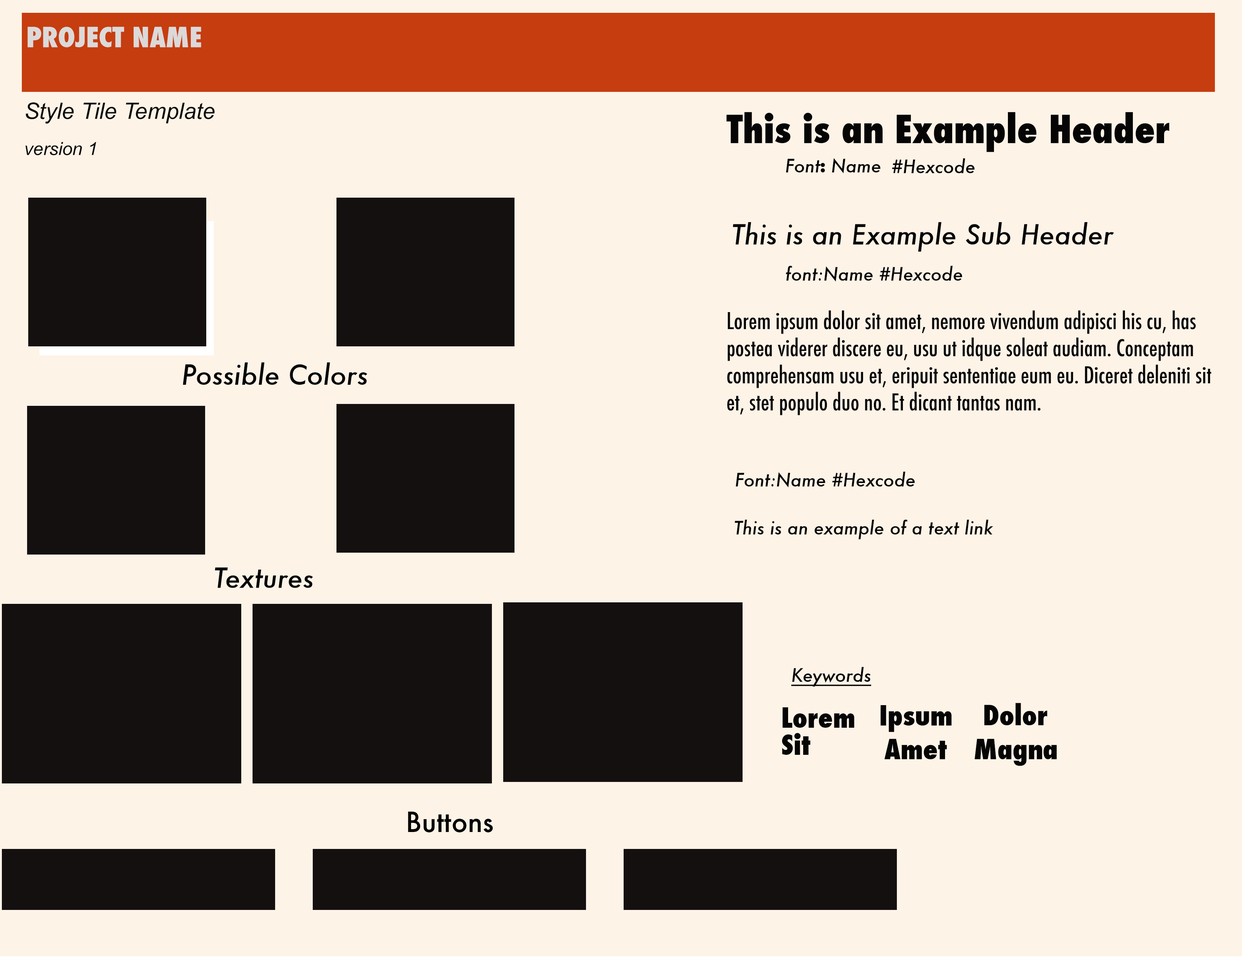
<style>
.page{position:relative;width:1242px;height:960px;background:#fdf3e7}
.page>*{position:absolute;margin:0}
.t1{font:27.1px "Futura-CondensedExtraBold";color:#dcd9d9}
.t2{font:22.6px/9px "Arial-ItalicMT";color:#090909}
.t3{font:18.1px/9px "Arial-ItalicMT";color:#090909}
.t4{font:37.6px "Futura-CondensedExtraBold";color:#050505}
.t5{font:18.1px "Futura-MediumItalic";color:#050505}
.t6{font:18.1px "Futura-CondensedExtraBold";color:#050505}
.t7{font:27.1px/9px "Futura-MediumItalic";color:#050505}
.t8{font:18.1px/9px "Futura-MediumItalic";color:#050505}
.t9{font:22.6px/27.1px "Futura-CondensedMedium";color:#050505}
.t10{font:27.1px "Futura-MediumItalic";color:#050505}
.t11{font:27.1px "Futura-CondensedExtraBold";color:#050505}
.t12{font:18.1px "Futura-MediumItalic";color:#050505;text-decoration:underline}
.t13{font:27.1px/9px "Futura-CondensedExtraBold";color:#050505}
.t14{font:27.1px/9px "Futura-CondensedExtraBold";color:#050505;text-decoration:underline}
.t15{font:27.1px "Futura-Medium";color:#000000}
</style>
<div class="page">
<p class="t1" style="left:27px;top:27px;width:174px;height:20px">PROJECT NAME</p>
<p class="t2" style="left:25px;top:102px;width:190px;height:53px">Style Tile Template <br><br><br><br><span class="t3">version 1</span></p>
<p class="t4" style="left:727px;top:112px;width:443px;height:40px">This is an Example Header</p>
<p class="t5" style="left:786px;top:158px;width:94px;height:16px">Font<span class="t6">: </span>Name</p>
<p class="t5" style="left:892px;top:158px;width:83px;height:15px">#Hexcode</p>
<p class="t7" style="left:733px;top:222px;width:381px;height:60px">This is an Example Sub Header <br><br><br><br>   <span class="t8"> font:Name #Hexcode</span></p>
<p class="t9" style="left:727px;top:310px;width:485px;height:105px">Lorem ipsum dolor sit amet, nemore vivendum adipisci his cu, has postea viderer discere eu, usu ut idque soleat audiam. Conceptam comprehensam usu et, eripuit sententiae eum eu. Diceret deleniti sit et, stet populo duo no. Et dicant tantas nam.</p>
<p class="t10" style="left:183px;top:362px;width:184px;height:23px"><span class="t11">           </span>Possible Colors</p>
<p class="t5" style="left:736px;top:471px;width:179px;height:16px">Font:Name #Hexcode</p>
<p class="t5" style="left:735px;top:519px;width:258px;height:20px">This is an example of a text link</p>
<p class="t10" style="left:215px;top:567px;width:98px;height:21px"><span class="t11">  </span>Textures</p>
<p class="t12" style="left:791px;top:667px;width:80px;height:20px">Keywords</p>
<p class="t13" style="left:782px;top:707px;width:73px;height:48px"><span class="t14"><br></span>Lorem<br><br><br>Sit</p>
<p class="t11" style="left:880px;top:705px;width:72px;height:27px">Ipsum</p>
<p class="t11" style="left:984px;top:703px;width:64px;height:22px">Dolor</p>
<p class="t11" style="left:885px;top:739px;width:62px;height:20px">Amet</p>
<p class="t11" style="left:975px;top:739px;width:82px;height:27px">Magna</p>
<p class="t15" style="left:408px;top:811px;width:85px;height:21px">Buttons</p>
</div>
